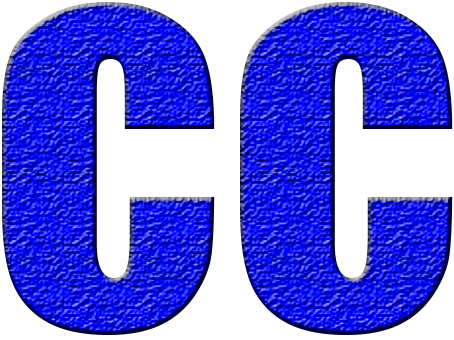
<style>
.page{position:relative;width:454px;height:340px;background:#ffffff}
.page>*{position:absolute;margin:0}
.t1{font:495.5px "Impact";scale:0.97 1}
</style>
<div class="page">
<p class="t1" style="left:2px;top:1px;width:451px;height:334px">cc</p>
</div>
